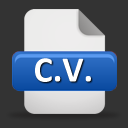
<style>
.page{position:relative;width:128px;height:128px;background:#333333}
.page>*{position:absolute;margin:0}
.t1{font:36px "Calibri-Bold";color:#ffffff}
</style>
<div class="page">
<p class="t1" style="left:35px;top:58px;width:56px;height:24px">C.V.</p>
</div>
